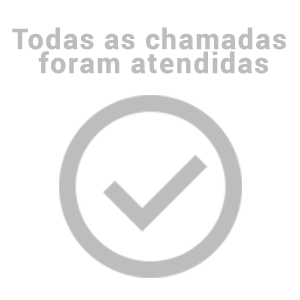
<style>
.page{position:relative;width:300px;height:300px;background:#ffffff}
.page>*{position:absolute;margin:0}
.t1{font:28px/24px "Roboto-Bold";letter-spacing:0.025em;color:#bdbdbd;font-weight:bold}
</style>
<div class="page">
<p class="t1" style="left:12px;top:27px;width:274px;height:47px;text-align:center">Todas as chamadas <br>foram atendidas</p>
</div>
